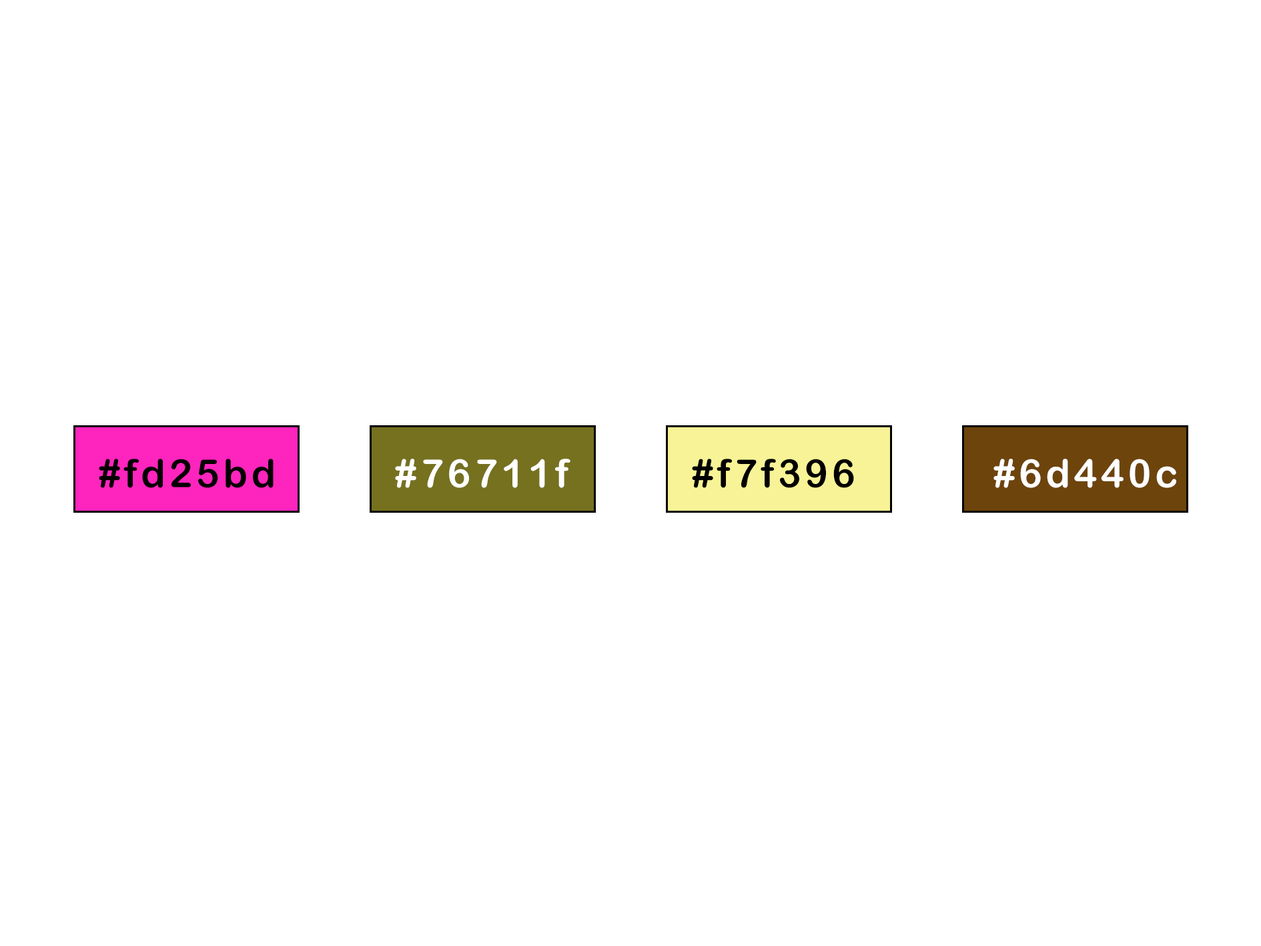
<style>
.page{position:relative;width:1261px;height:946px;background:#ffffff}
.page>*{position:absolute;margin:0}
.t1{font:38.9px "ArialRoundedMTBold";letter-spacing:0.1em;color:#030000}
.t2{font:38.9px "ArialRoundedMTBold";letter-spacing:0.1em;color:#ffffff}
.t3{font:38.9px "ArialRoundedMTBold";letter-spacing:0.1em;color:#000000}
</style>
<div class="page">
<p class="t1" style="left:99px;top:458px;width:175px;height:30px">#fd25bd</p>
<p class="t2" style="left:395px;top:458px;width:176px;height:30px">#76711f</p>
<p class="t1" style="left:692px;top:458px;width:162px;height:30px"><span class="t3">#</span>f7f396</p>
<p class="t2" style="left:994px;top:458px;width:182px;height:30px">#6d440c</p>
</div>
